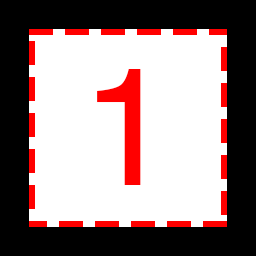
<style>
.page{position:relative;width:256px;height:256px;background:#ffffff}
.page>*{position:absolute;margin:0}
.t1{font:167.8px "Helvetica";letter-spacing:0.05em;color:#ff0000}
</style>
<div class="page">
<p class="t1" style="left:97px;top:69px;width:44px;height:116px">1</p>
</div>
